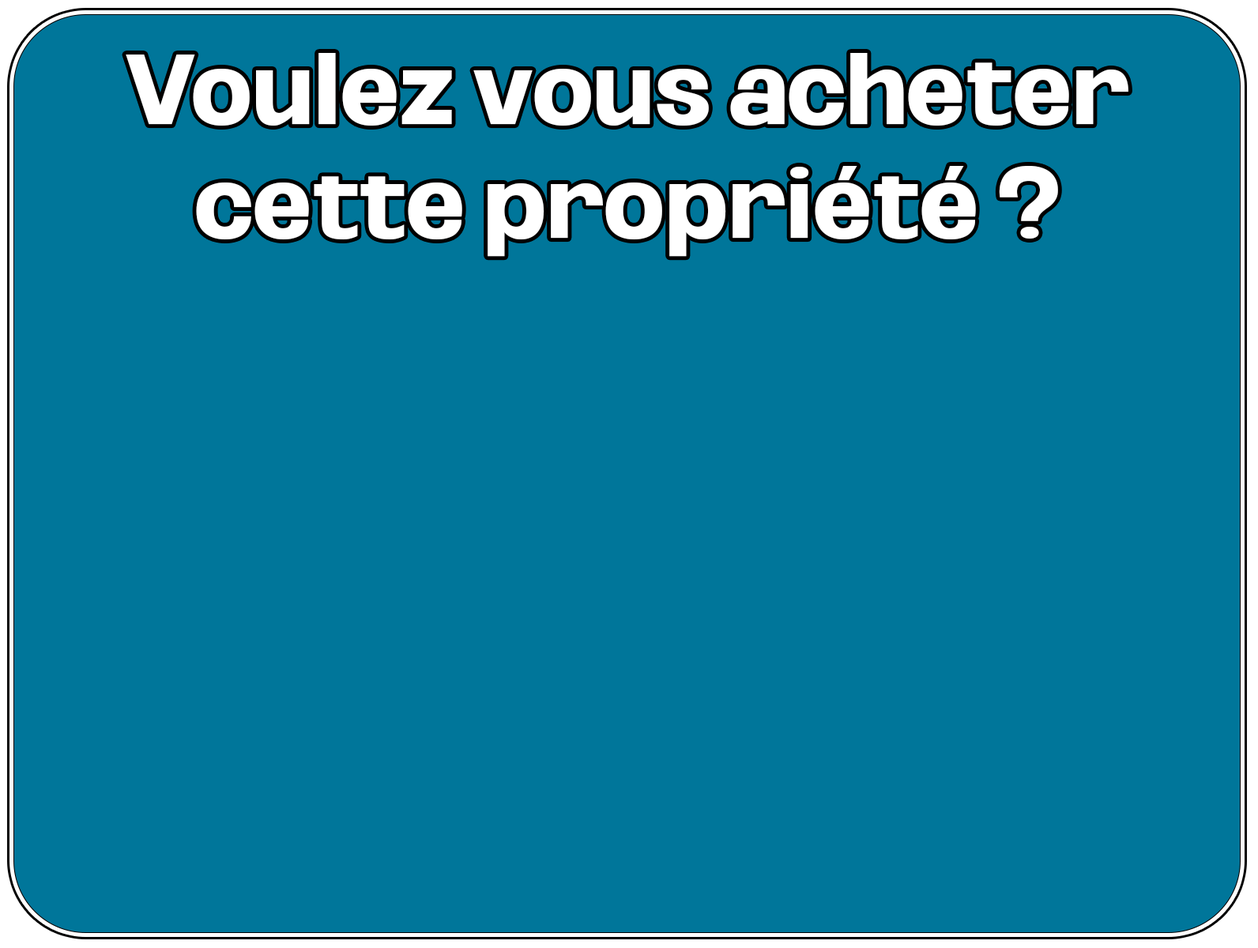
<style>
.page{position:relative;width:1258px;height:948px;background:#00769a}
.page>*{position:absolute;margin:0}
.t1{font:94.8px "Oddlini-ExtraBold";color:#ffffff}
</style>
<div class="page">
<p class="t1" style="left:126px;top:53px;width:1002px;height:204px;text-align:center">Voulez vous acheter cette propriété ?</p>
</div>
